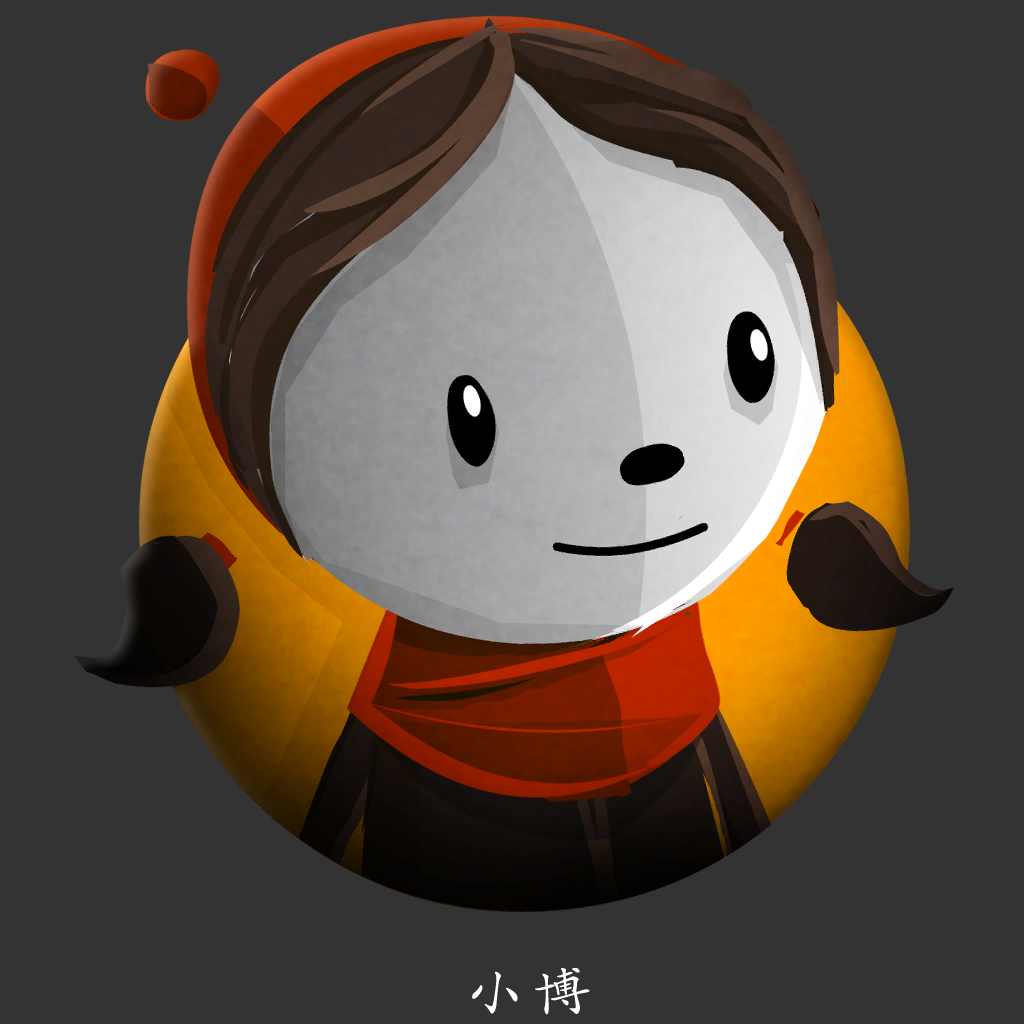
<style>
.page{position:relative;width:1024px;height:1024px;background:#333333}
.page>*{position:absolute;margin:0}
.t1{font:53.3px "STKaiti";letter-spacing:0.1em;color:#ffffff}
</style>
<div class="page">
<p class="t1" style="left:472px;top:968px;width:118px;height:47px">小博</p>
</div>
